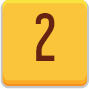
<style>
.page{position:relative;width:89px;height:89px;background:#fbc53b}
.page>*{position:absolute;margin:0}
.t1{font:60px "LibelSuitRg-Regular";color:#662312}
</style>
<div class="page">
<p class="t1" style="left:35px;top:13px;width:20px;height:48px">2</p>
</div>
